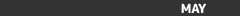
<style>
.page{position:relative;width:240px;height:16px;background:#333333}
.page>*{position:absolute;margin:0}
.t1{font:12.5px "RoundedMplus1c-ExtraBold";color:#ffffff}
</style>
<div class="page">
<p class="t1" style="left:181px;top:3px;width:25px;height:11px">MAY</p>
</div>
